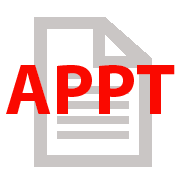
<style>
.page{position:relative;width:182px;height:182px;background:#ffffff}
.page>*{position:absolute;margin:0}
.t1{font:72px "MyriadPro-Bold";color:#fa0900}
</style>
<div class="page">
<p class="t1" style="left:6px;top:65px;width:169px;height:49px">APPT</p>
</div>
